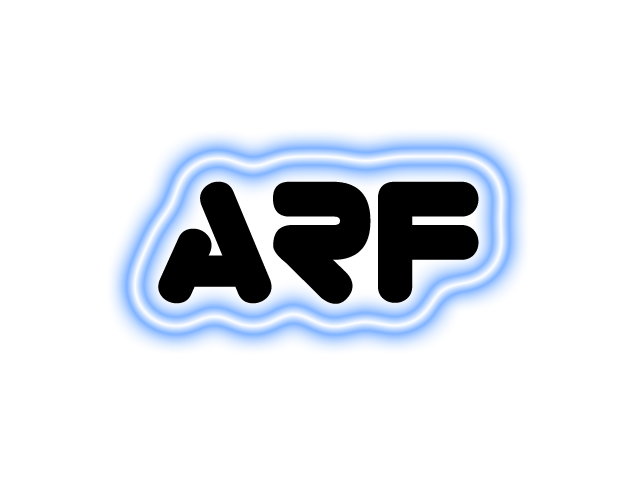
<style>
.page{position:relative;width:640px;height:480px;background:#ffffff}
.page>*{position:absolute;margin:0}
.t1{font:200px "Zorque";color:#000000;font-weight:bold}
</style>
<div class="page">
<p class="t1" style="left:158px;top:181px;width:321px;height:123px">ARF</p>
</div>
